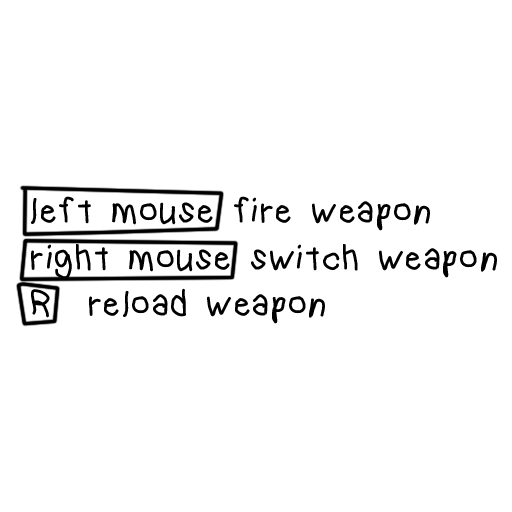
<style>
.page{position:relative;width:512px;height:512px;background:#ffffff}
.page>*{position:absolute;margin:0}
.t1{font:38.9px "kindergarten";color:#000000}
</style>
<div class="page">
<p class="t1" style="left:31px;top:196px;width:466px;height:128px">left mouse fire weapon<br>right mouse switch weapon<br>R  reload weapon</p>
</div>
